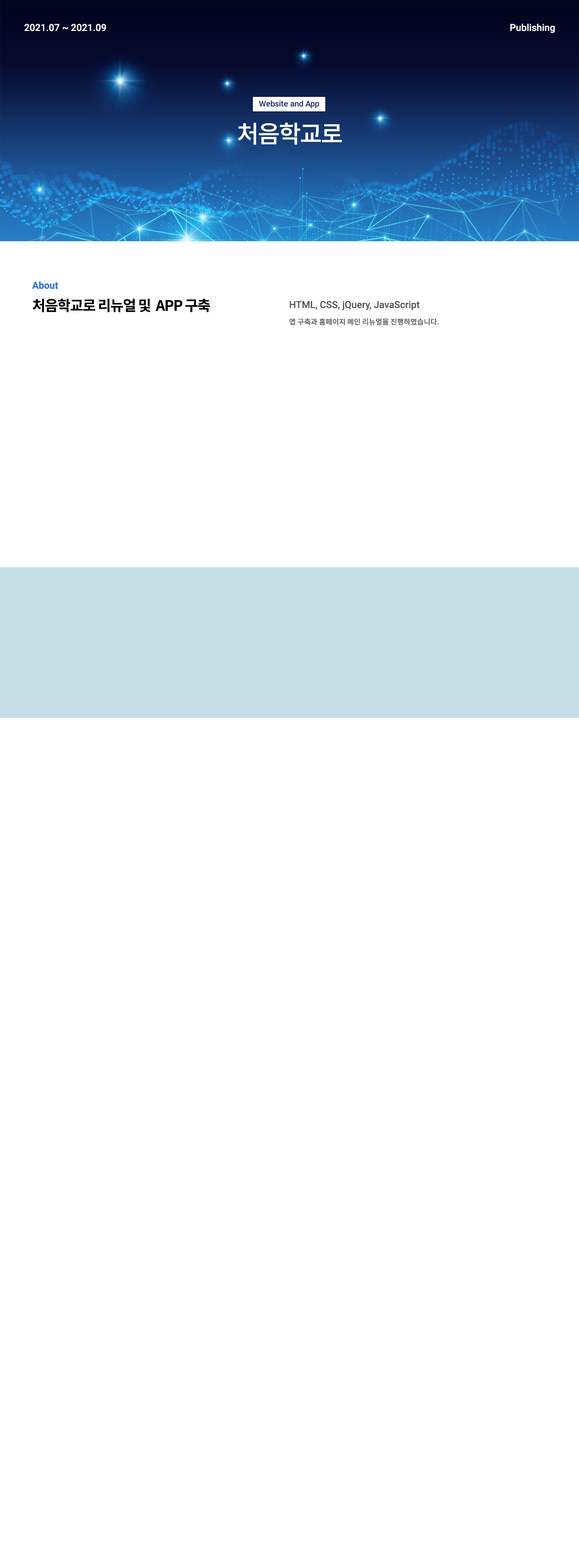
<style>
.page{position:relative;width:579px;height:1568px;background:#ffffff}
.page>*{position:absolute;margin:0}
.t1{font:9.6px "Roboto-Medium";color:#ffffff}
.t2{font:8px "Roboto-Medium";color:#12295b}
.t3{font:24.1px "NotoSansCJKkr-Medium";letter-spacing:-0.05em;color:#ffffff}
.t4{font:9.6px "Roboto-Bold";color:#2571f0}
.t5{font:14.5px "NotoSansCJKkr-Bold";letter-spacing:-0.05em;color:#000000}
.t6{font:9.6px "Roboto-Medium";color:#555555}
.t7{font:7.2px "NotoSansCJKkr-Medium";color:#555555}
</style>
<div class="page">
<p class="t1" style="left:24px;top:24px;width:82px;height:7px">2021.07 ~ 2021.09</p>
<p class="t1" style="left:510px;top:24px;width:45px;height:9px">Publishing</p>
<p class="t2" style="left:259px;top:100px;width:60px;height:8px">Website and App</p>
<p class="t3" style="left:238px;top:123px;width:104px;height:22px">처음학교로</p>
<p class="t4" style="left:32px;top:281px;width:26px;height:8px">About</p>
<p class="t5" style="left:33px;top:298px;width:177px;height:14px">처음학교로 리뉴얼 및  APP 구축</p>
<p class="t6" style="left:289px;top:301px;width:131px;height:9px">HTML, CSS, jQuery, JavaScript</p>
<p class="t7" style="left:289px;top:318px;width:150px;height:7px">앱 구축과 홈페이지 메인 리뉴얼을 진행하였습니다.</p>
</div>
